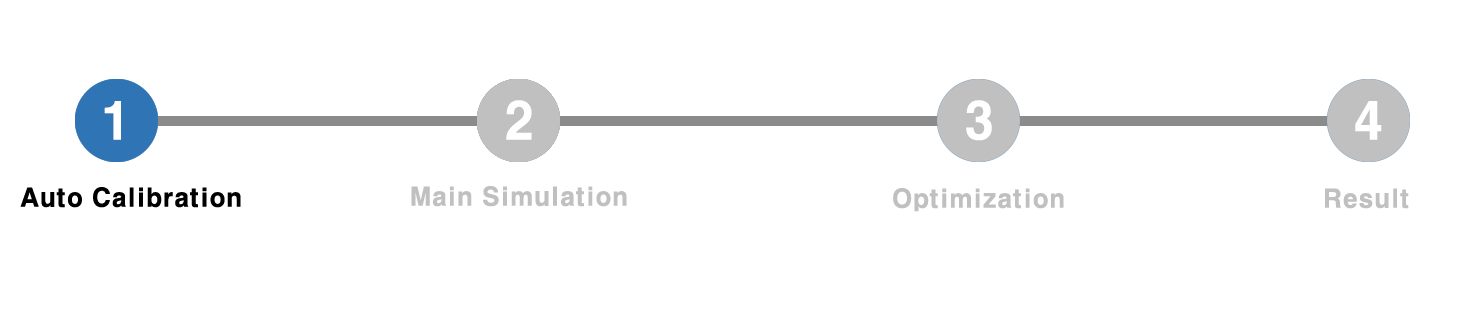
<style>
.page{position:relative;width:1484px;height:323px;background:#ffffff}
.page>*{position:absolute;margin:0}
.t1{font:50px "H2gtrE";color:#ffffff}
.t2{font:25px "H2gtrE";color:#000000}
.t3{font:25px "H2gtrE";color:#c0c0c0}
</style>
<div class="page">
<p class="t1" style="left:104px;top:101px;width:17px;height:39px">1</p>
<p class="t1" style="left:506px;top:100px;width:26px;height:40px">2</p>
<p class="t1" style="left:966px;top:100px;width:26px;height:41px">3</p>
<p class="t1" style="left:1355px;top:101px;width:27px;height:39px">4</p>
<p class="t2" style="left:20px;top:187px;width:221px;height:21px">Auto Calibration</p>
<p class="t3" style="left:411px;top:186px;width:216px;height:21px">Main Simulation</p>
<p class="t3" style="left:893px;top:188px;width:171px;height:24px">Optimization</p>
<p class="t3" style="left:1325px;top:188px;width:84px;height:21px">Result</p>
</div>
